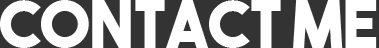
<style>
.page{position:relative;width:379px;height:48px;background:#ffffff}
.page>*{position:absolute;margin:0}
.t1{font:65.5px "TheBoldFont";color:#ffffff}
</style>
<div class="page">
<p class="t1" style="left:0px;top:0px;width:377px;height:48px">Contact Me</p>
</div>
